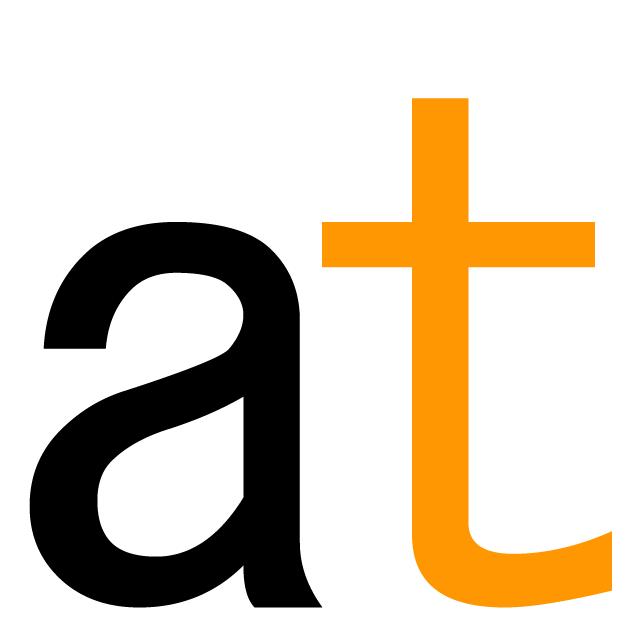
<style>
.page{position:relative;width:640px;height:640px;background:#ffffff}
.page>*{position:absolute;margin:0}
.t1{font:720px "MS-Gothic";color:#000000}
.t2{font:720px "MS-Gothic";color:#ff9702}
</style>
<div class="page">
<p class="t1" style="left:29px;top:98px;width:583px;height:510px">a<span class="t2">t</span></p>
</div>
